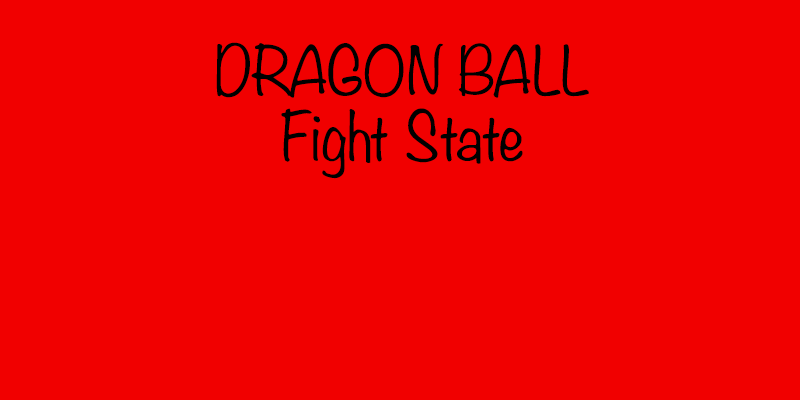
<style>
.page{position:relative;width:800px;height:400px;background:#f10000}
.page>*{position:absolute;margin:0}
.t1{font:60px/65.3px "Noteworthy-Light";color:#000000}
</style>
<div class="page">
<p class="t1" style="left:216px;top:42px;width:373px;height:137px;text-align:center">DRAGON BALL<br>Fight State</p>
</div>
